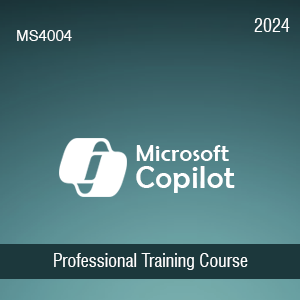
<style>
.page{position:relative;width:300px;height:300px}
.page>*{position:absolute;margin:0}
.t1{font:15.3px "Swiss721BT-Roman";color:#ffffff}
.t2{font:18px "Swiss721BT-RomanCondensed";color:#ffffff}
.t3{font:24px/27.1px "BerlinSansFB-Reg";letter-spacing:0.025em;color:#ffffff}
.t4{font:32px/27.1px "BerlinSansFB-Reg";letter-spacing:0.025em;color:#ffffff}
</style>
<div class="page">
<p class="t1" style="left:17px;top:30px;width:55px;height:11px">MS4004</p>
<p class="t2" style="left:254px;top:18px;width:36px;height:14px">2024</p>
<p class="t3" style="left:136px;top:145px;width:99px;height:48px">Microsoft<br><span class="t4">Copilot</span></p>
<p class="t2" style="left:54px;top:253px;width:194px;height:17px">Professional Training Course</p>
</div>
